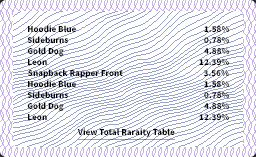
<style>
.page{position:relative;width:256px;height:157px;background:#ffffff}
.page>*{position:absolute;margin:0}
.t1{font:8px/11px "NotoSansKR-Black";color:#000000}
.t2{font:8px "NotoSansKR-Black";color:#000000;text-decoration:underline}
</style>
<div class="page">
<p class="t1" style="left:27px;top:25px;width:203px;height:96px;text-align:center">Hoodie Blue                                                             1.58%<br>Sideburns                                                             0.78%<br>Gold Dog                                                             4.88%<br>Leon                                                                       12.39%<br>Snapback Rapper Front                                            3.56%<br>Hoodie Blue                                                             1.58%<br>Sideburns                                                             0.78%<br>Gold Dog                                                             4.88%<br>Leon                                                                       12.39%</p>
<p class="t2" style="left:77px;top:128px;width:98px;height:12px">View Total Raraity Table</p>
</div>
